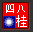
<style>
.page{position:relative;width:33px;height:32px;background:#f20000}
.page>*{position:absolute;margin:0}
.t1{font:10.4px "SimSun";color:#ffffff}
.t2{font:11.7px "SimSun";color:#ffffff}
</style>
<div class="page">
<p class="t1" style="left:6px;top:4px;width:19px;height:9px">四八</p>
<p class="t2" style="left:16px;top:15px;width:11px;height:12px">桂</p>
</div>
